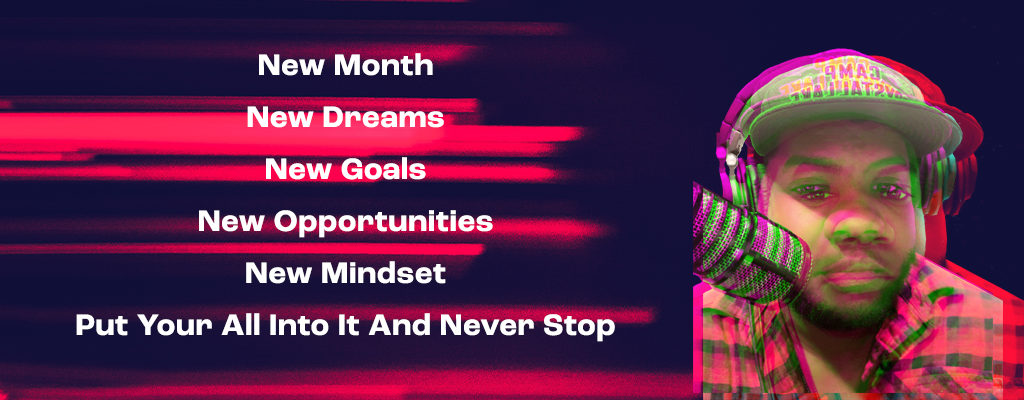
<style>
.page{position:relative;width:1024px;height:400px}
.page>*{position:absolute;margin:0}
.t1{font:31px/52px "RocGrotesk-Bold";letter-spacing:0.025em;color:#ffffff}
</style>
<div class="page">
<p class="t1" style="left:76px;top:53px;width:539px;height:289px;text-align:center">New Month<br>New Dreams<br>New Goals<br>New Opportunities<br>New Mindset<br>Put Your All Into It And Never Stop</p>
</div>
